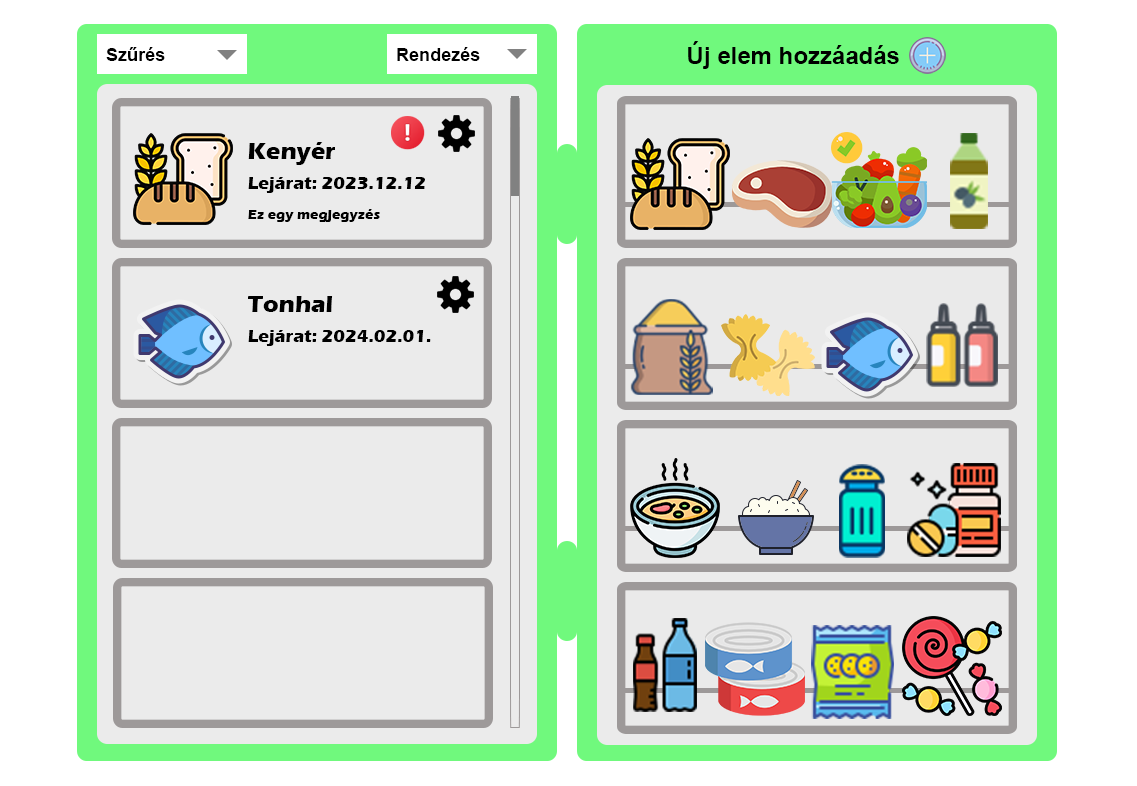
<style>
.page{position:relative;width:1137px;height:786px;background:#ebebeb}
.page>*{position:absolute;margin:0}
.t1{font:24px "Arial-BoldMT";color:#000000}
.t2{font:18.5px "Arial-BoldMT";color:#000000}
.t3{font:18px/30px "ErasITC-Bold";color:#000000}
.t4{font:24px/30px "ErasITC-Bold";color:#000000}
.t5{font:14px/30px "ErasITC-Bold";color:#000000}
</style>
<div class="page">
<p class="t1" style="left:688px;top:41px;width:211px;height:28px">Új elem hozzáadás</p>
<p class="t2" style="left:106px;top:47px;width:59px;height:14px">Szűrés</p>
<p class="t2" style="left:397px;top:47px;width:83px;height:14px">Rendezés</p>
<p class="t3" style="left:248px;top:142px;width:177px;height:80px"><span class="t4">Kenyér<br></span>Lejárat: 2023.12.12<br><span class="t5">Ez egy megjegyzés</span></p>
<p class="t3" style="left:248px;top:296px;width:183px;height:50px"><span class="t4">Tonhal<br></span>Lejárat: 2024.02.01.</p>
</div>
